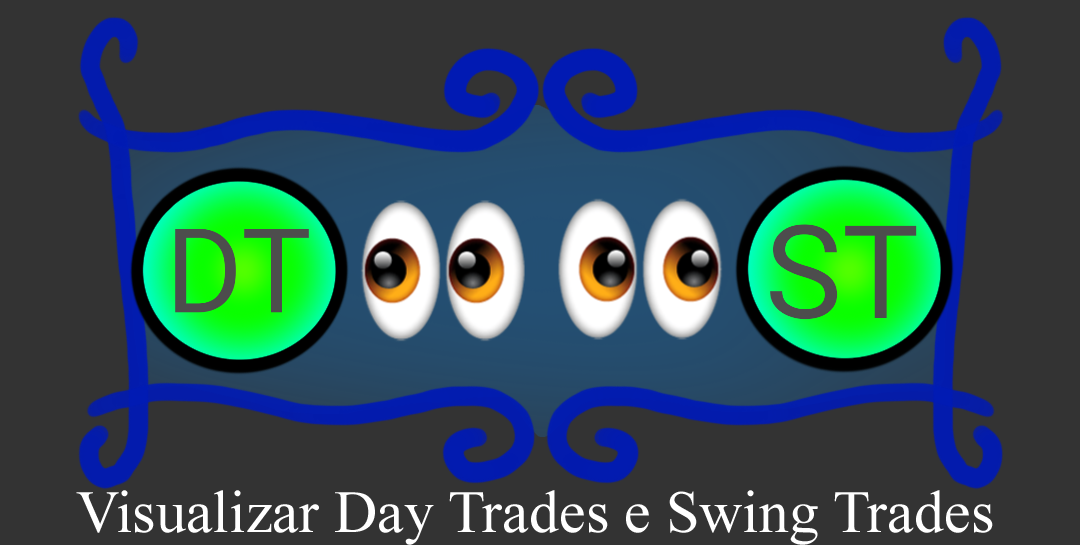
<style>
.page{position:relative;width:1080px;height:545px;background:#333333}
.page>*{position:absolute;margin:0}
.t1{font:60px "TimesNewRomanPSMT";color:#ffffff}
</style>
<div class="page">
<p class="t1" style="left:76px;top:490px;width:917px;height:55px">Visualizar Day Trades e Swing Trades</p>
</div>
